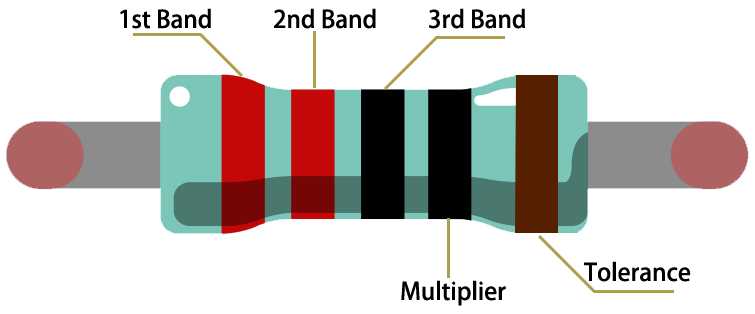
<style>
.page{position:relative;width:755px;height:314px;background:#ffffff}
.page>*{position:absolute;margin:0}
.t1{font:24px "AdobeHeitiStd-Regular";color:#000000}
</style>
<div class="page">
<p class="t1" style="left:120px;top:8px;width:91px;height:21px">1st Band</p>
<p class="t1" style="left:274px;top:8px;width:102px;height:21px">2nd Band</p>
<p class="t1" style="left:429px;top:8px;width:96px;height:21px">3rd Band</p>
<p class="t1" style="left:584px;top:261px;width:107px;height:21px">Tolerance</p>
<p class="t1" style="left:401px;top:280px;width:105px;height:26px">Multiplier</p>
</div>
